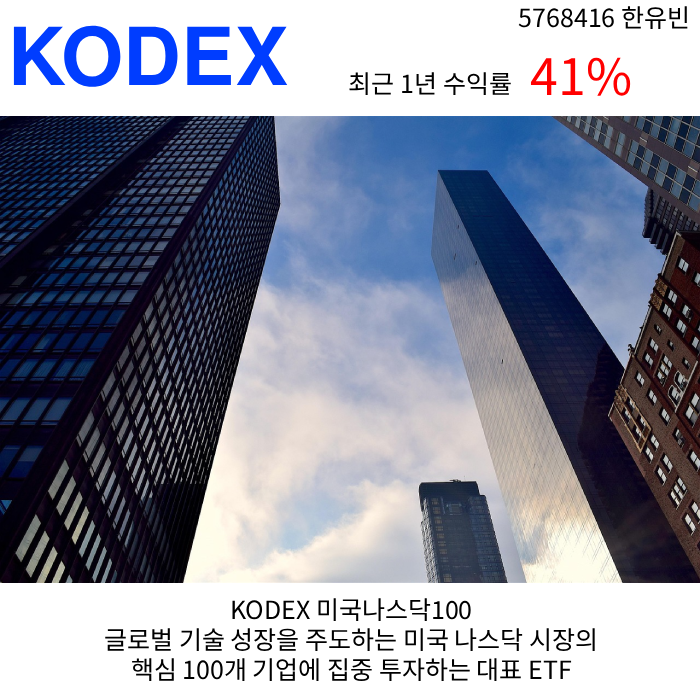
<style>
.page{position:relative;width:700px;height:700px;background:#ffffff}
.page>*{position:absolute;margin:0}
.t1{font:25px "NotoSansKR-Regular";color:#000000}
.t2{font:80px "NimbusSanL-Bol";color:#003dff}
.t3{font:50px "NotoSansKR-Regular";color:#ff0000}
</style>
<div class="page">
<p class="t1" style="left:518px;top:6px;width:170px;height:23px">5768416 한유빈</p>
<p class="t2" style="left:13px;top:25px;width:275px;height:62px">KODEX</p>
<p class="t3" style="left:530px;top:57px;width:101px;height:39px">41%</p>
<p class="t1" style="left:349px;top:72px;width:162px;height:23px">최근 1년 수익률</p>
<p class="t1" style="left:105px;top:598px;width:490px;height:83px;text-align:center">KODEX 미국나스닥100<br>글로벌 기술 성장을 주도하는 미국 나스닥 시장의<br>핵심 100개 기업에 집중 투자하는 대표 ETF</p>
</div>
